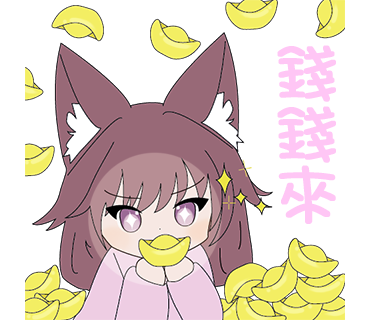
<style>
.page{position:relative;width:370px;height:320px;background:#ffffff}
.page>*{position:absolute;margin:0}
.t1{font:69.6px/61.2px "ARTianniuB5-Bold";color:#ffc6f5;font-weight:bold}
</style>
<div class="page">
<p class="t1" style="left:277px;top:45px;width:59px;height:179px">錢<br>錢<br>來</p>
</div>
